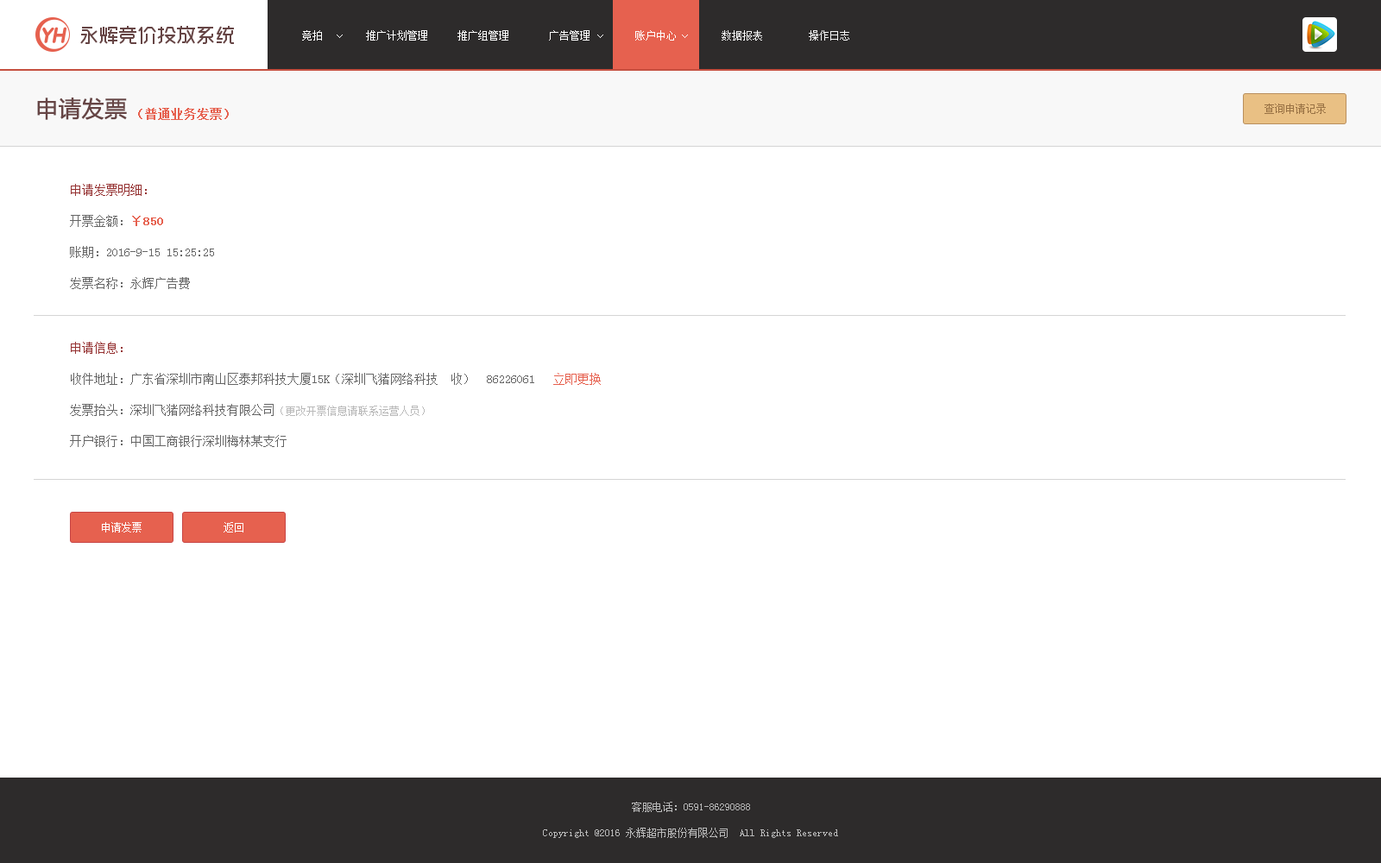
<style>
.page{position:relative;width:1381px;height:863px;background:#ffffff}
.page>*{position:absolute;margin:0}
.t1{font:10.4px "SimSun";color:#ffffff}
.t2{font:10.4px "SimSun";color:#f8f8f8}
.t3{font:22.4px "MicrosoftYaHei";color:#664545;font-weight:bold}
.t4{font:12.1px "SimSun";color:#e6614f;font-weight:bold}
.t5{font:10.4px "SimSun";color:#997244}
.t6{font:12.1px/31.1px "SimSun";color:#666666}
.t7{font:12.1px/31.1px "SimSun";color:#953232}
.t8{font:12.1px/31.1px "SimSun";color:#e6614f;font-weight:bold}
.t9{font:12.1px/31.1px "SimSun";color:#e6614f}
.t10{font:10.4px/31.1px "SimSun";color:#bababa}
.t11{font:10.4px "SimSun";color:#bababa}
</style>
<div class="page">
<p class="t1" style="left:302px;top:30px;width:20px;height:11px">竞拍</p>
<p class="t1" style="left:366px;top:30px;width:61px;height:11px">推广计划管理</p>
<p class="t1" style="left:458px;top:30px;width:50px;height:11px">推广组管理</p>
<p class="t1" style="left:549px;top:30px;width:41px;height:11px">广告管理</p>
<p class="t1" style="left:635px;top:30px;width:41px;height:11px">账户中心</p>
<p class="t1" style="left:635px;top:30px;width:41px;height:11px">账户中心</p>
<p class="t2" style="left:722px;top:30px;width:40px;height:11px">数据报表</p>
<p class="t2" style="left:809px;top:30px;width:40px;height:11px">操作日志</p>
<p class="t3" style="left:37px;top:98px;width:90px;height:22px">申请发票</p>
<p class="t4" style="left:138px;top:108px;width:91px;height:12px">（普通业务发票）</p>
<p class="t5" style="left:1265px;top:104px;width:61px;height:10px">查询申请记录</p>
<p class="t6" style="left:70px;top:184px;width:144px;height:105px"><span class="t7">申请发票明细： <br></span>开票金额：<span class="t8">￥850<br></span>账期：2016-9-15 15:25:25   <br>发票名称：永辉广告费</p>
<p class="t6" style="left:70px;top:342px;width:531px;height:105px"><span class="t7">申请信息：<br></span>收件地址：广东省深圳市南山区泰邦科技大厦15K（深圳飞猪网络科技  收）  86226061   <span class="t9">立即更换<br></span>发票抬头：深圳飞猪网络科技有限公司<span class="t10">（更改开票信息请联系运营人员） <br></span>开户银行：中国工商银行深圳梅林某支行</p>
<p class="t1" style="left:102px;top:522px;width:40px;height:11px">申请发票</p>
<p class="t1" style="left:224px;top:522px;width:19px;height:11px">返回</p>
<p class="t11" style="left:632px;top:802px;width:118px;height:10px">客服电话：0591-86290888</p>
<p class="t11" style="left:543px;top:828px;width:295px;height:10px">Copyright @2016 永辉超市股份有限公司  All Rights Reserved</p>
</div>
